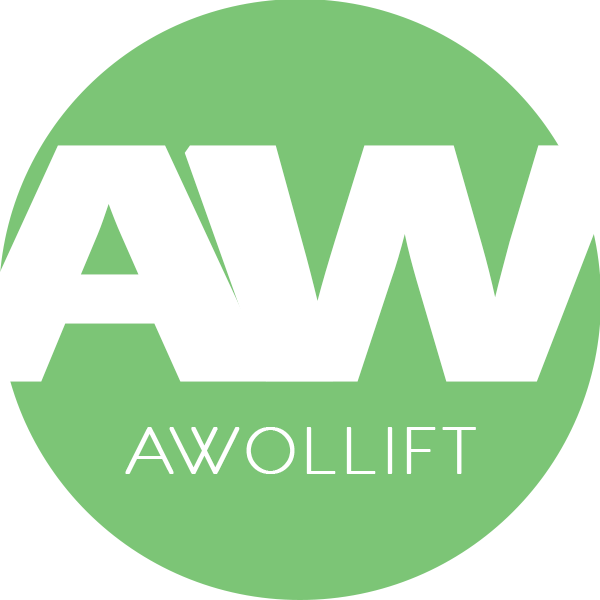
<style>
.page{position:relative;width:600px;height:600px;background:#ffffff}
.page>*{position:absolute;margin:0}
.t1{font:75px "Eurofurencelight";letter-spacing:0.075em;color:#ffffff;font-weight:bold}
</style>
<div class="page">
<p class="t1" style="left:125px;top:427px;width:351px;height:47px">AWOLLIFT</p>
</div>
